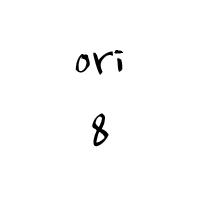
<style>
.page{position:relative;width:200px;height:200px;background:#ffffff}
.page>*{position:absolute;margin:0}
.t1{font:60px/72px "NanumBrush";color:#010000}
</style>
<div class="page">
<p class="t1" style="left:75px;top:50px;width:48px;height:97px;text-align:center">ori<br>8</p>
</div>
